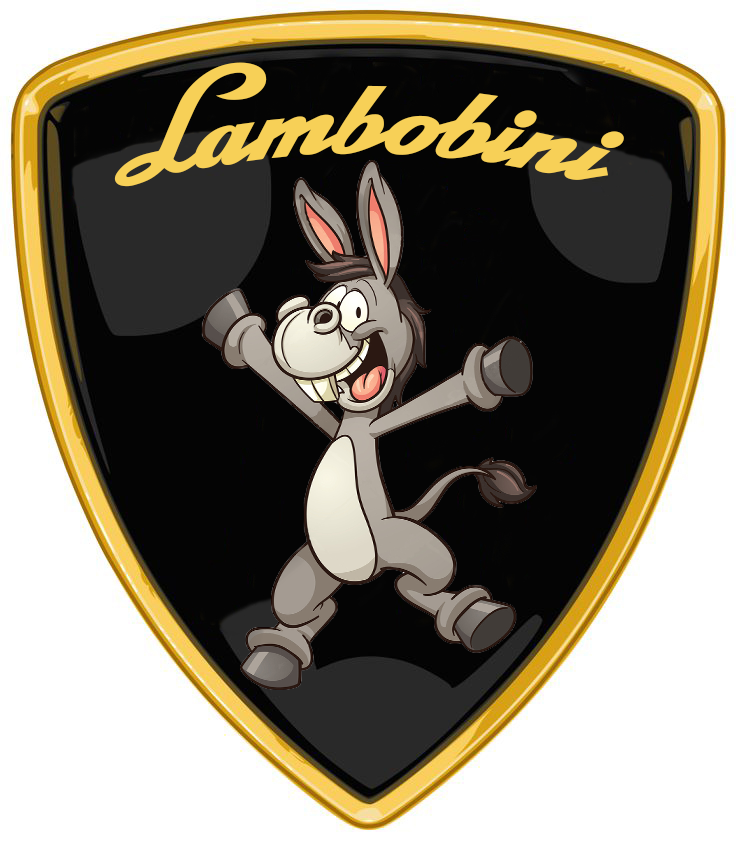
<style>
.page{position:relative;width:736px;height:841px;background:#ffffff}
.page>*{position:absolute;margin:0}
.t1{font:120px "LaMacchina";color:#f7d057}
</style>
<div class="page">
<p class="t1" style="left:114px;top:62px;width:510px;height:125px">Lambobini</p>
</div>
